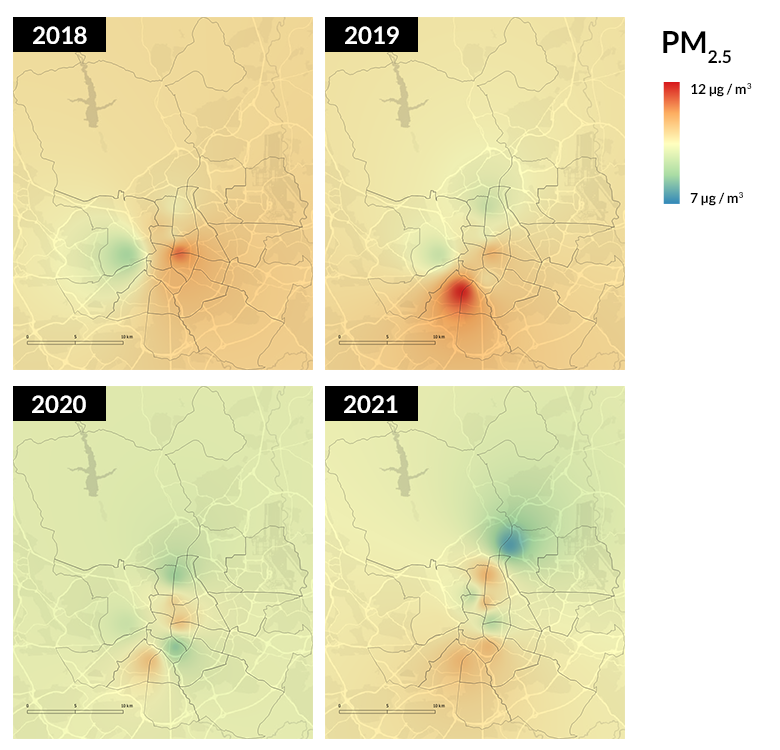
<style>
.page{position:relative;width:780px;height:750px;background:#ffffff}
.page>*{position:absolute;margin:0}
.t1{font:24px "Lato-Bold";color:#ffffff}
.t2{font:30px "Lato-Bold";color:#000000}
.t3{font:14px "Lato-Bold";color:#000000}
</style>
<div class="page">
<p class="t1" style="left:33px;top:26px;width:54px;height:18px">2018</p>
<p class="t1" style="left:345px;top:26px;width:54px;height:18px">2019</p>
<p class="t2" style="left:663px;top:31px;width:68px;height:33px">PM2.5</p>
<p class="t3" style="left:691px;top:83px;width:61px;height:14px">12 μg / m3</p>
<p class="t3" style="left:690px;top:192px;width:53px;height:14px">7 μg / m3</p>
<p class="t1" style="left:32px;top:395px;width:54px;height:18px">2020</p>
<p class="t1" style="left:344px;top:395px;width:54px;height:18px">2021</p>
</div>
